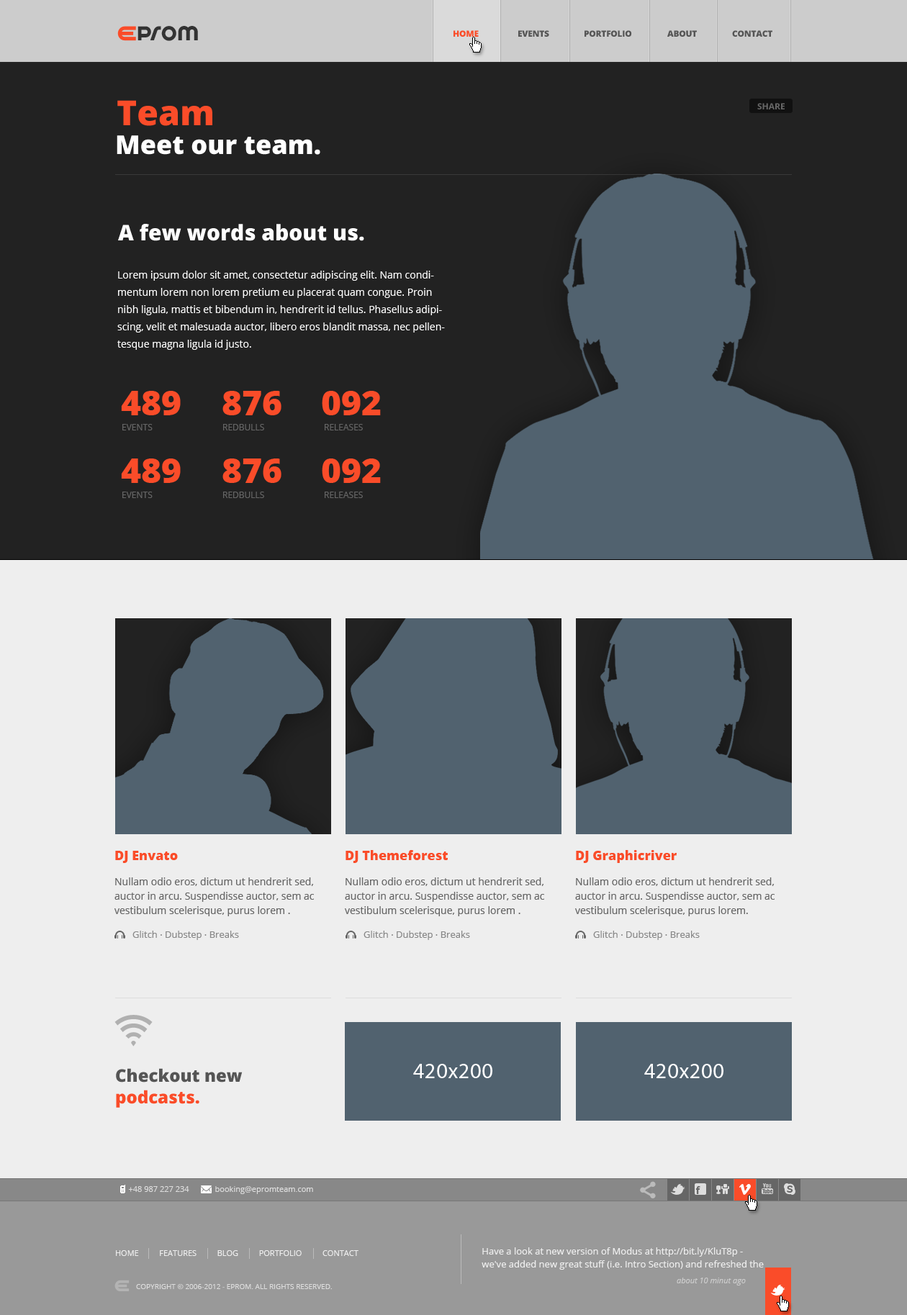
<style>
.page{position:relative;width:907px;height:1315px;background:#eeeeee}
.page>*{position:absolute;margin:0}
.t1{font:22.1px "SpinCycleOT";letter-spacing:0.025em;color:#333333}
.t2{font:8.6px "OpenSans-Extrabold";letter-spacing:-0.025em;color:#fa4c29;text-transform:uppercase}
.t3{font:8.6px "OpenSans-Extrabold";letter-spacing:-0.025em;color:#555555;text-transform:uppercase}
.t4{font:34.5px "OpenSans-Extrabold";color:#fa4c29}
.t5{font:8.6px "OpenSans-Bold";color:#666666}
.t6{font:25.9px "OpenSans-Extrabold";color:#ffffff}
.t7{font:21.6px "OpenSans-Extrabold";color:#ffffff}
.t8{font:10.1px/17.3px "OpenSans";color:#ffffff}
.t9{font:8.6px "OpenSans";color:#666666;text-transform:uppercase}
.t10{font:13px "OpenSans-Extrabold";color:#fa4c29}
.t11{font:10.1px/14.4px "OpenSans";color:#666666}
.t12{font:9.4px "OpenSans";color:#888888}
.t13{font:17.3px/21.6px "OpenSans-Extrabold";color:#555555}
.t14{font:17.3px/21.6px "OpenSans-Extrabold";color:#fa4c29}
.t15{font:21.6px "MyriadPro-Regular";letter-spacing:0.025em;color:#ffffff}
.t16{font:7.9px "OpenSans";color:#dddddd}
.t17{font:7.9px "OpenSans";color:#eeeeee;text-transform:uppercase}
.t18{font:9.4px/13px "OpenSans";color:#eeeeee}
.t19{font:7.9px "OpenSans-Italic";color:#cccccc}
.t20{font:7.2px "OpenSans";color:#dddddd;text-transform:uppercase}
</style>
<div class="page">
<p class="t1" style="left:137px;top:26px;width:61px;height:15px">prom</p>
<p class="t2" style="left:453px;top:30px;width:26px;height:7px">Home</p>
<p class="t3" style="left:518px;top:30px;width:31px;height:7px">EVENTS</p>
<p class="t3" style="left:584px;top:30px;width:48px;height:7px">PORTFOLIO</p>
<p class="t3" style="left:667px;top:30px;width:30px;height:7px">ABOUT</p>
<p class="t3" style="left:732px;top:30px;width:40px;height:7px">Contact</p>
<p class="t4" style="left:117px;top:100px;width:95px;height:26px">Team</p>
<p class="t5" style="left:757px;top:103px;width:27px;height:6px">SHARE</p>
<p class="t6" style="left:117px;top:135px;width:203px;height:20px">Meet our team.</p>
<p class="t7" style="left:118px;top:224px;width:246px;height:17px">A few words about us.</p>
<p class="t8" style="left:117px;top:271px;width:328px;height:79px">Lorem ipsum dolor sit amet, consectetur adipiscing elit. Nam condimentum lorem non lorem pretium eu placerat quam congue. Proin nibh ligula, mattis et bibendum in, hendrerit id tellus. Phasellus adipiscing, velit et malesuada auctor, libero eros blandit massa, nec pellentesque magna ligula id justo.</p>
<p class="t4" style="left:121px;top:391px;width:60px;height:24px">489</p>
<p class="t4" style="left:222px;top:391px;width:59px;height:24px">876</p>
<p class="t4" style="left:322px;top:391px;width:59px;height:24px">092</p>
<p class="t9" style="left:122px;top:424px;width:31px;height:6px">events</p>
<p class="t9" style="left:223px;top:424px;width:41px;height:6px">redbulls</p>
<p class="t9" style="left:325px;top:424px;width:38px;height:6px">releases</p>
<p class="t4" style="left:121px;top:458px;width:60px;height:25px">489</p>
<p class="t4" style="left:222px;top:458px;width:59px;height:25px">876</p>
<p class="t4" style="left:322px;top:458px;width:59px;height:25px">092</p>
<p class="t9" style="left:122px;top:492px;width:31px;height:6px">events</p>
<p class="t9" style="left:223px;top:492px;width:41px;height:6px">redbulls</p>
<p class="t9" style="left:325px;top:492px;width:38px;height:6px">releases</p>
<p class="t10" style="left:115px;top:851px;width:63px;height:12px">DJ Envato</p>
<p class="t10" style="left:345px;top:850px;width:103px;height:13px">DJ Themeforest</p>
<p class="t10" style="left:576px;top:850px;width:101px;height:13px">DJ Graphicriver</p>
<p class="t11" style="left:114px;top:877px;width:200px;height:39px">Nullam odio eros, dictum ut hendrerit sed, auctor in arcu. Suspendisse auctor, sem ac vestibulum scelerisque, purus lorem .</p>
<p class="t11" style="left:345px;top:877px;width:199px;height:39px">Nullam odio eros, dictum ut hendrerit sed, auctor in arcu. Suspendisse auctor, sem ac vestibulum scelerisque, purus lorem .</p>
<p class="t11" style="left:575px;top:877px;width:199px;height:39px">Nullam odio eros, dictum ut hendrerit sed, auctor in arcu. Suspendisse auctor, sem ac vestibulum scelerisque, purus lorem.</p>
<p class="t12" style="left:132px;top:931px;width:107px;height:9px">Glitch · Dubstep · Breaks</p>
<p class="t12" style="left:363px;top:931px;width:107px;height:9px">Glitch · Dubstep · Breaks</p>
<p class="t12" style="left:593px;top:931px;width:107px;height:9px">Glitch · Dubstep · Breaks</p>
<p class="t13" style="left:116px;top:1068px;width:127px;height:40px">Checkout new <br><span class="t14">podcasts.</span></p>
<p class="t15" style="left:413px;top:1064px;width:79px;height:14px">420x200</p>
<p class="t15" style="left:644px;top:1064px;width:79px;height:14px">420x200</p>
<p class="t16" style="left:128px;top:1186px;width:61px;height:6px">+48 987 227 234</p>
<p class="t16" style="left:215px;top:1186px;width:98px;height:8px">booking@epromteam.com</p>
<p class="t17" style="left:116px;top:1250px;width:242px;height:6px">Home          Features          Blog          Portfolio          Contact</p>
<p class="t18" style="left:481px;top:1247px;width:283px;height:23px">Have a look at new version of Modus at http://bit.ly/KluT8p - we've added new great stuff (i.e. Intro Section) and refreshed the theme!</p>
<p class="t19" style="left:677px;top:1277px;width:69px;height:8px">about 10 minut ago</p>
<p class="t20" style="left:136px;top:1284px;width:196px;height:5px">Copyright © 2006-2012 - EPROM. All rights reserved.</p>
</div>
